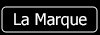
<style>
.page{position:relative;width:100px;height:35px;background:#000000}
.page>*{position:absolute;margin:0}
.t1{font:16px "Tahoma";color:#ffffff}
</style>
<div class="page">
<p class="t1" style="left:14px;top:13px;width:73px;height:16px">La Marque</p>
</div>
